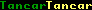
<style>
.page{position:relative;width:92px;height:10px;background:#000000}
.page>*{position:absolute;margin:0}
.t1{font:13.2px "Onesize";color:#009900;scale:0.91 1}
.t2{font:13.2px "Onesize";color:#ffff66;scale:0.91 1}
</style>
<div class="page">
<p class="t1" style="left:0px;top:1px;width:46px;height:8px">Tancar</p>
<p class="t2" style="left:46px;top:1px;width:46px;height:8px">Tancar</p>
</div>
